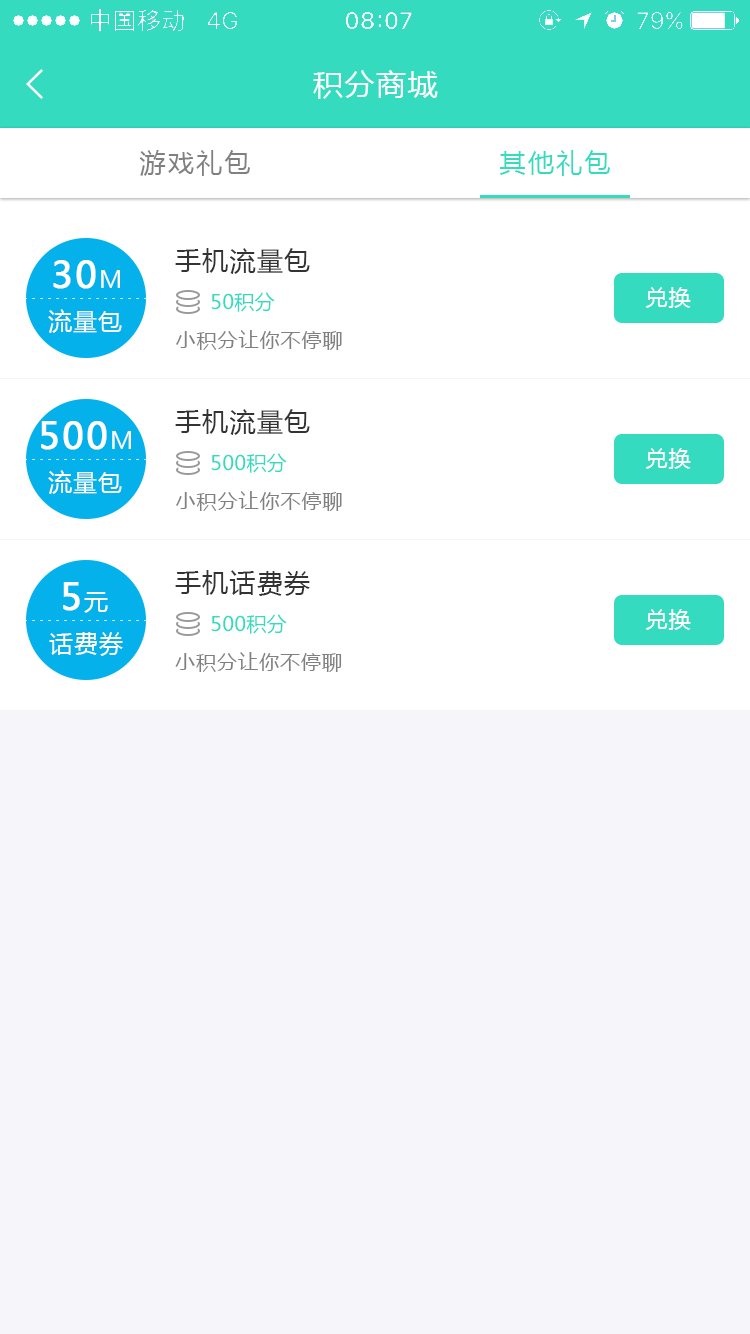
<style>
.page{position:relative;width:750px;height:1334px;background:#f6f5fa}
.page>*{position:absolute;margin:0}
.t1{font:30px "MicrosoftYaHei";letter-spacing:0.05em;color:#ffffff}
.t2{font:26px "MicrosoftYaHei";letter-spacing:0.09em;color:#808080}
.t3{font:26px "MicrosoftYaHei";letter-spacing:0.09em;color:#34dbbf}
.t4{font:26px "MicrosoftYaHei";letter-spacing:0.05em;color:#333333}
.t5{font:36px "MicrosoftYaHei";letter-spacing:0.05em;color:#ffffff;font-weight:bold}
.t6{font:24px "MicrosoftYaHei";letter-spacing:0.05em;color:#ffffff}
.t7{font:20px "MicrosoftYaHei";letter-spacing:0.02em;color:#34dbbf}
.t8{font:22px "MicrosoftYaHei";letter-spacing:0.05em;color:#fefefe}
.t9{font:20px "MicrosoftYaHei";letter-spacing:0.05em;color:#808080}
</style>
<div class="page">
<p class="t1" style="left:313px;top:70px;width:125px;height:29px">积分商城</p>
<p class="t2" style="left:139px;top:150px;width:111px;height:26px">游戏礼包</p>
<p class="t3" style="left:499px;top:150px;width:111px;height:26px">其他礼包</p>
<p class="t4" style="left:175px;top:248px;width:135px;height:26px">手机流量包</p>
<p class="t5" style="left:53px;top:260px;width:67px;height:29px">30<span class="t6">M</span></p>
<p class="t7" style="left:211px;top:292px;width:64px;height:20px">50积分</p>
<p class="t8" style="left:645px;top:287px;width:46px;height:21px">兑换</p>
<p class="t6" style="left:48px;top:309px;width:74px;height:24px">流量包</p>
<p class="t9" style="left:176px;top:330px;width:166px;height:20px">小积分让你不停聊</p>
<p class="t4" style="left:175px;top:409px;width:135px;height:26px">手机流量包</p>
<p class="t5" style="left:41px;top:421px;width:90px;height:29px">500<span class="t6">M</span></p>
<p class="t8" style="left:645px;top:448px;width:46px;height:21px">兑换</p>
<p class="t7" style="left:211px;top:453px;width:76px;height:20px">500积分</p>
<p class="t6" style="left:48px;top:470px;width:74px;height:24px">流量包</p>
<p class="t9" style="left:176px;top:491px;width:166px;height:20px">小积分让你不停聊</p>
<p class="t5" style="left:63px;top:582px;width:45px;height:31px">5<span class="t6">元</span></p>
<p class="t4" style="left:175px;top:570px;width:135px;height:26px">手机话费券</p>
<p class="t7" style="left:211px;top:614px;width:76px;height:20px">500积分</p>
<p class="t8" style="left:645px;top:609px;width:46px;height:21px">兑换</p>
<p class="t6" style="left:49px;top:632px;width:74px;height:24px">话费券</p>
<p class="t9" style="left:175px;top:652px;width:167px;height:20px">小积分让你不停聊</p>
</div>
